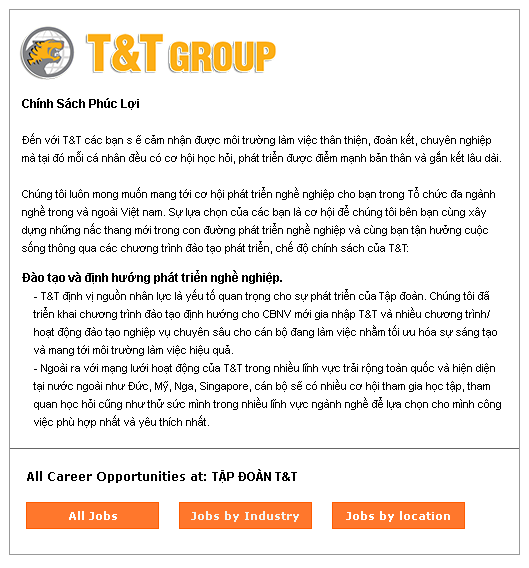
<style>
.page{position:relative;width:529px;height:568px;background:#ffffff}
.page>*{position:absolute;margin:0}
.t1{font:11px/18px "ArialMT";color:#000000}
.t2{font:12px/36px "Arial-BoldMT";color:#000000}
.t3{font:11px/36px "ArialMT";color:#000000}
.t4{font:12px/30px "Arial-BoldMT";color:#000000}
.t5{font:12px "Arial-BoldMT";color:#000000;text-transform:uppercase}
</style>
<div class="page">
<p class="t1" style="left:22px;top:98px;width:479px;height:330px"><span class="t2">Chính Sách Phúc Lợi<br></span>Đ<span class="t3">ến với T&amp;T các bạn s ẽ cảm nhận được môi trường làm việc thân thiện, đoàn kết, chuyên nghiệp <br></span>mà tại đó mỗi cá nhân đều có cơ hội học hỏi, phát triển được điểm mạnh bản thân và gắn kết lâu dài.<br><br>Chúng tôi luôn mong muốn mang tới cơ hội phát triển nghề nghiệp cho bạn trong Tổ chức đa ngành <br>nghề trong và ngoài Việt nam. Sự lựa chọn của các bạn là cơ hội để chúng tôi bên bạn cùng xây <br>dựng những nấc thang mới trong con đường phát triển nghề nghiệp và cùng bạn tận hưởng cuộc <br>sống thông qua các chương trình đào tạo phát triển, chế độ chính sách của T&amp;T:<br><span class="t4">Đào tạo và định hướng phát triển nghề nghiệp.<br></span>    - T&amp;T định vị nguồn nhân lực là yếu tố quan trọng cho sự phát triển của Tập đoàn. Chúng tôi đã <br>    triển khai chương trình đào tạo định hướng cho CBNV mới gia nhập T&amp;T và nhiều chương trình/ <br>    hoạt động đào tạo nghiệp vụ chuyên sâu cho cán bộ đang làm việc nhằm tối ưu hóa sự sáng tạo <br>    và mang tới môi trường làm việc hiệu quả.<br>    - Ngoài ra với mạng lưới hoạt động của T&amp;T trong nhiều lĩnh vực trải rộng toàn quốc và hiện diện <br>    tại nước ngoài như Đức, Mỹ, Nga, Singapore, cán bộ sẽ có nhiều cơ hội tham gia học tập, tham <br>    quan học hỏi cũng như thử sức mình trong nhiều lĩnh vực ngành nghề để lựa chọn cho mình công <br>    việc phù hợp nhất và yêu thích nhất.</p>
<p class="t5" style="left:212px;top:469px;width:85px;height:14px">Tập đoàn T&amp;T</p>
</div>
